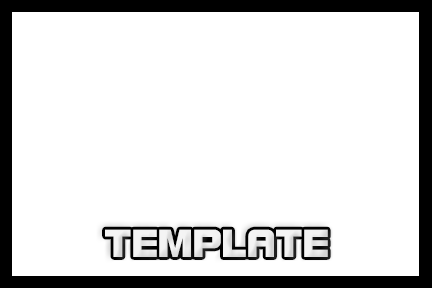
<style>
.page{position:relative;width:432px;height:288px;background:#ffffff}
.page>*{position:absolute;margin:0}
.t1{font:41.7px "BolsterBold";color:#f3f3f3}
</style>
<div class="page">
<p class="t1" style="left:105px;top:229px;width:223px;height:28px">TEMPLATE</p>
</div>
